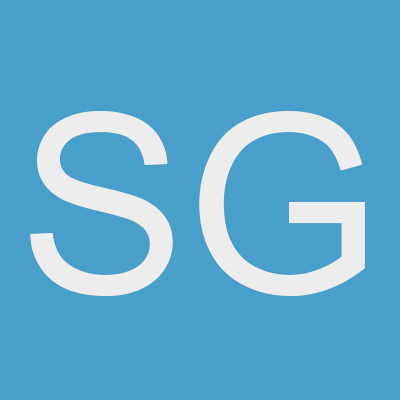
<style>
.page{position:relative;width:400px;height:400px;background:#489fc9}
.page>*{position:absolute;margin:0}
.t1{font:250px "ArialMT";color:#eeeded}
</style>
<div class="page">
<p class="t1" style="left:30px;top:111px;width:335px;height:185px">SG</p>
</div>
